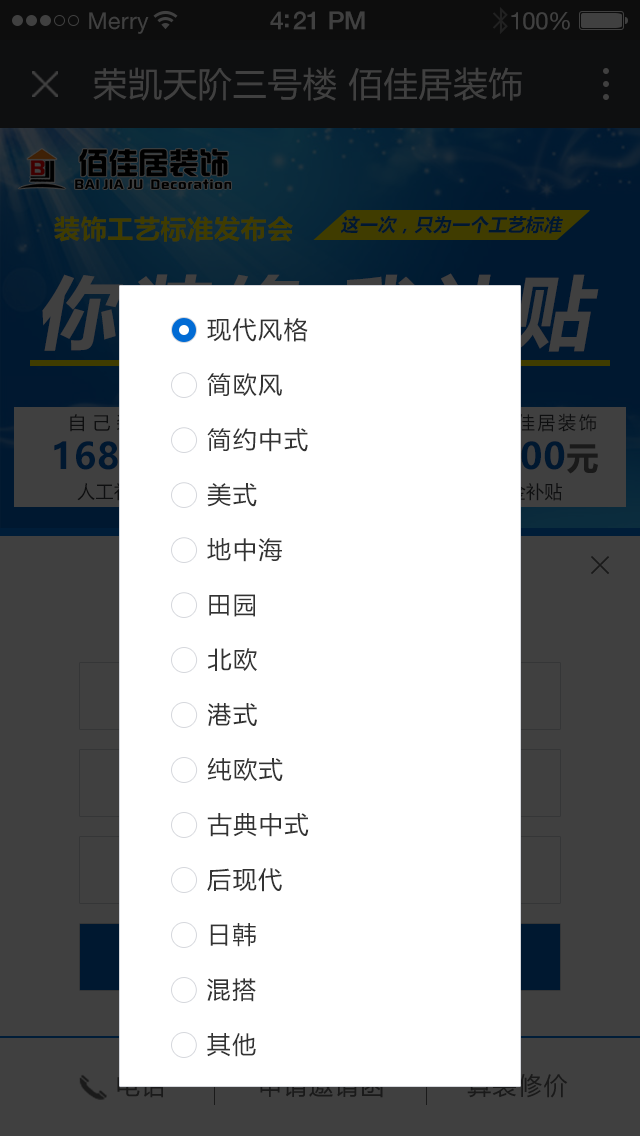
<style>
.page{position:relative;width:640px;height:1136px;background:#ffffff}
.page>*{position:absolute;margin:0}
.t1{font:34px "MicrosoftYaHei";letter-spacing:0.025em;color:#404040}
.t2{font:26px "MicrosoftYaHei-Bold";letter-spacing:0.025em;color:#403c00}
.t3{font:18px "MicrosoftYaHei-Bold";letter-spacing:0.025em;color:#001830;font-style:italic}
.t4{font:24px "MicrosoftYaHei";letter-spacing:0.065em;color:#333333}
.t5{font:23.8px "MicrosoftYaHei";letter-spacing:0.065em;color:#333333}
</style>
<div class="page">
<p class="t1" style="left:93px;top:67px;width:429px;height:34px">荣凯天阶三号楼 佰佳居装饰</p>
<p class="t2" style="left:54px;top:216px;width:239px;height:26px">装饰工艺标准发布会</p>
<p class="t3" style="left:341px;top:216px;width:222px;height:18px">这一次，只为一个工艺标准</p>
<p class="t4" style="left:207px;top:318px;width:101px;height:24px">现代风格</p>
<p class="t5" style="left:207px;top:373px;width:75px;height:23px">简欧风</p>
<p class="t5" style="left:207px;top:428px;width:101px;height:24px">简约中式</p>
<p class="t5" style="left:207px;top:483px;width:50px;height:24px">美式</p>
<p class="t5" style="left:207px;top:538px;width:75px;height:24px">地中海</p>
<p class="t5" style="left:209px;top:594px;width:46px;height:23px">田园</p>
<p class="t4" style="left:207px;top:648px;width:50px;height:23px">北欧</p>
<p class="t4" style="left:207px;top:703px;width:50px;height:23px">港式</p>
<p class="t4" style="left:207px;top:757px;width:76px;height:24px">纯欧式</p>
<p class="t4" style="left:207px;top:813px;width:102px;height:24px">古典中式</p>
<p class="t4" style="left:207px;top:868px;width:75px;height:24px">后现代</p>
<p class="t4" style="left:210px;top:923px;width:46px;height:24px">日韩</p>
<p class="t4" style="left:207px;top:978px;width:49px;height:24px">混搭</p>
<p class="t4" style="left:207px;top:1033px;width:49px;height:24px">其他</p>
</div>
